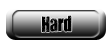
<style>
.page{position:relative;width:112px;height:48px;background:#ffffff}
.page>*{position:absolute;margin:0}
.t1{font:18px "YouAreLoved";color:#000000}
</style>
<div class="page">
<p class="t1" style="left:42px;top:15px;width:30px;height:17px">Hard</p>
</div>
